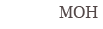
<style>
.page{position:relative;width:103px;height:29px;background:#ffffff}
.page>*{position:absolute;margin:0}
.t1{font:16px "LucidaBright";color:#534848}
</style>
<div class="page">
<p class="t1" style="left:59px;top:6px;width:39px;height:12px">MOH</p>
</div>
